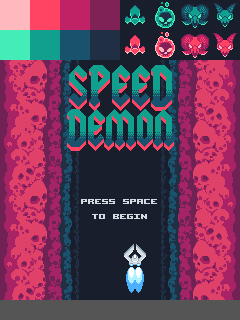
<style>
.page{position:relative;width:240px;height:320px;background:#191e2c}
.page>*{position:absolute;margin:0}
.t1{font:13px "AcknowledgeTT-BRK-";color:#d3dce2}
</style>
<div class="page">
<p class="t1" style="left:81px;top:199px;width:76px;height:20px;text-align:center">PRESS SPACE<br>TO BEGIN</p>
</div>
